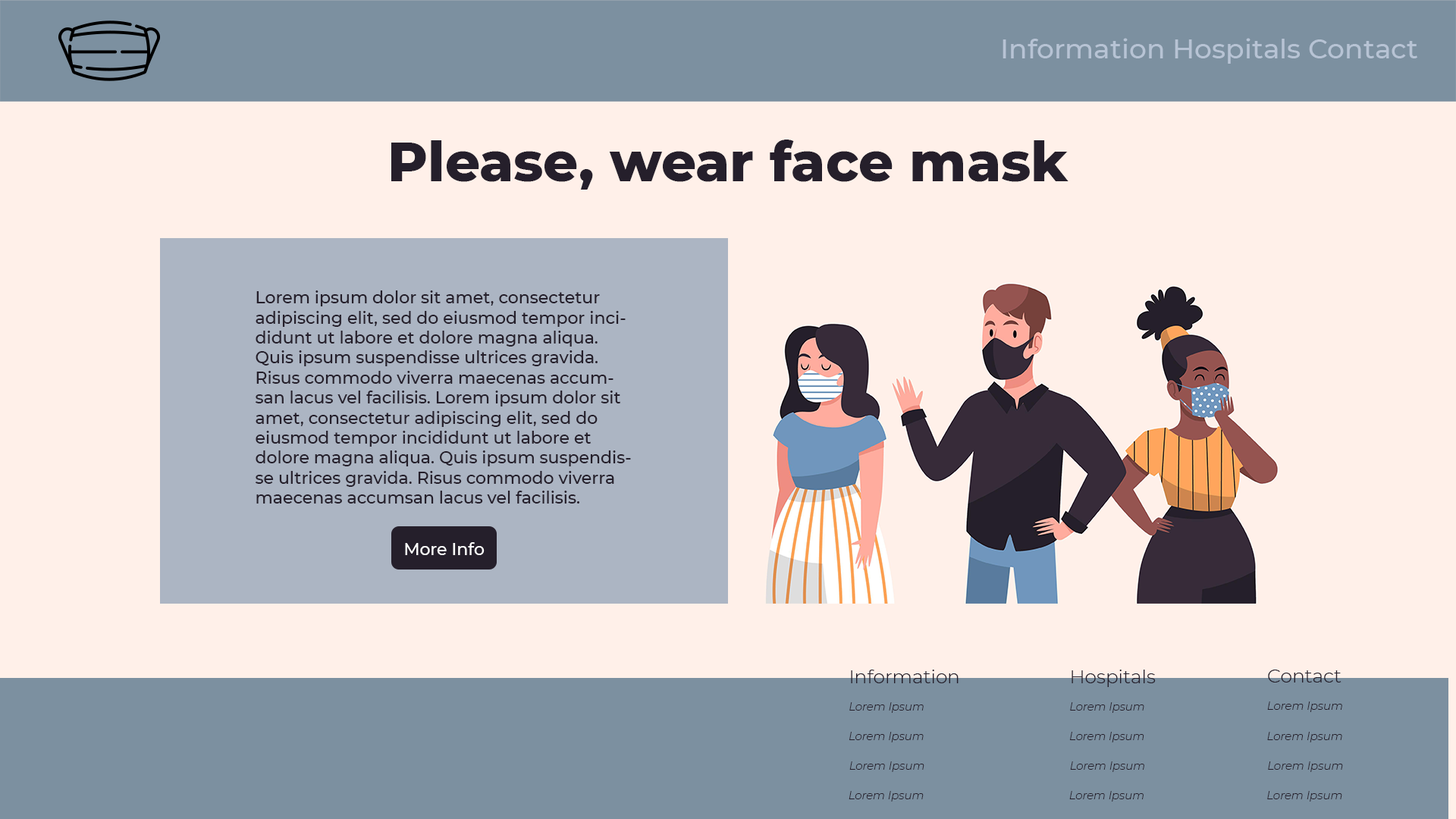
<style>
.page{position:relative;width:1456px;height:819px;background:#fff0e9}
.page>*{position:absolute;margin:0}
.t1{font:27.3px "Montserrat-Medium";color:#b7c3d4}
.t2{font:54.6px "Montserrat-ExtraBold";color:#251f2b}
.t3{font:16.7px "Montserrat-Medium";color:#251f2b}
.t4{font:16.7px "Montserrat-Medium";color:#ffffff}
.t5{font:19px "Montserrat-Light";color:#251f2b}
.t6{font:18.9px "Montserrat-Light";color:#251f2b}
.t7{font:19.1px "Montserrat-Light";color:#251f2b}
.t8{font:11.5px "Montserrat-LightItalic";color:#251f2b}
.t9{font:11.4px "Montserrat-LightItalic";color:#251f2b}
</style>
<div class="page">
<p class="t1" style="left:1003px;top:38px;width:414px;height:26px">Information Hospitals Contact</p>
<p class="t2" style="left:391px;top:140px;width:677px;height:50px">Please, wear face mask</p>
<p class="t3" style="left:256px;top:290px;width:375px;height:214px">Lorem ipsum dolor sit amet, consectetur adipiscing elit, sed do eiusmod tempor incididunt ut labore et dolore magna aliqua. Quis ipsum suspendisse ultrices gravida. Risus commodo viverra maecenas accumsan lacus vel facilisis. Lorem ipsum dolor sit amet, consectetur adipiscing elit, sed do eiusmod tempor incididunt ut labore et dolore magna aliqua. Quis ipsum suspendisse ultrices gravida. Risus commodo viverra maecenas accumsan lacus vel facilisis.</p>
<p class="t4" style="left:405px;top:542px;width:80px;height:13px">More Info</p>
<p class="t5" style="left:851px;top:670px;width:108px;height:13px">Information</p>
<p class="t6" style="left:1072px;top:670px;width:84px;height:17px">Hospitals</p>
<p class="t7" style="left:1268px;top:670px;width:73px;height:12px">Contact</p>
<p class="t8" style="left:1267px;top:701px;width:75px;height:11px">Lorem Ipsum</p>
<p class="t9" style="left:849px;top:702px;width:75px;height:11px">Lorem Ipsum</p>
<p class="t9" style="left:1070px;top:702px;width:74px;height:11px">Lorem Ipsum</p>
<p class="t9" style="left:849px;top:732px;width:75px;height:10px">Lorem Ipsum</p>
<p class="t9" style="left:1069px;top:732px;width:75px;height:10px">Lorem Ipsum</p>
<p class="t8" style="left:1267px;top:732px;width:75px;height:10px">Lorem Ipsum</p>
<p class="t9" style="left:849px;top:761px;width:75px;height:11px">Lorem Ipsum</p>
<p class="t9" style="left:1070px;top:761px;width:74px;height:11px">Lorem Ipsum</p>
<p class="t8" style="left:1268px;top:761px;width:75px;height:11px">Lorem Ipsum</p>
<p class="t9" style="left:849px;top:791px;width:75px;height:11px">Lorem Ipsum</p>
<p class="t9" style="left:1069px;top:791px;width:75px;height:11px">Lorem Ipsum</p>
<p class="t8" style="left:1267px;top:791px;width:75px;height:11px">Lorem Ipsum</p>
</div>
